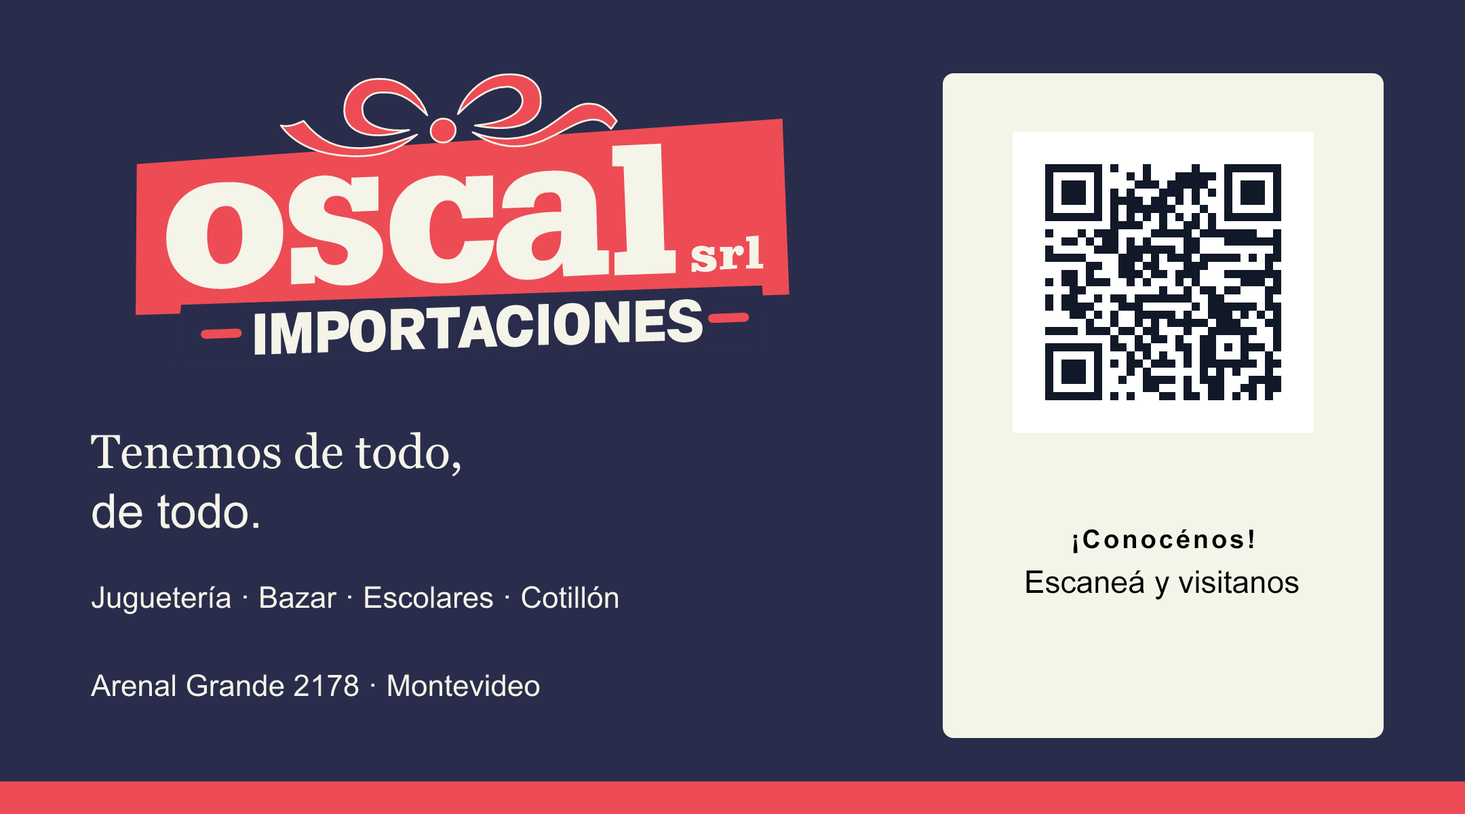
<style>
.page{position:relative;width:1465px;height:814px;background:#292d4b}
.page>*{position:absolute;margin:0}
.t1{font:47.5px "Georgia";color:#f5f4e9}
.t2{font:47.5px "ArialMT";color:#f5f4e9}
.t3{font:25.8px "Arial-BoldMT";letter-spacing:0.105em;color:#000000}
.t4{font:31.2px "ArialMT";color:#000000}
.t5{font:29.8px "ArialMT";color:#f5f4e9}
</style>
<div class="page">
<p class="t1" style="left:91px;top:432px;width:370px;height:45px">Tenemos de todo,</p>
<p class="t2" style="left:92px;top:493px;width:166px;height:35px">de todo.</p>
<p class="t3" style="left:1073px;top:529px;width:180px;height:24px">¡Conocénos!</p>
<p class="t4" style="left:1026px;top:570px;width:273px;height:30px">Escaneá y visitanos</p>
<p class="t5" style="left:92px;top:586px;width:526px;height:29px">Juguetería · Bazar · Escolares · Cotillón</p>
<p class="t5" style="left:91px;top:674px;width:449px;height:23px">Arenal Grande 2178 · Montevideo</p>
</div>
